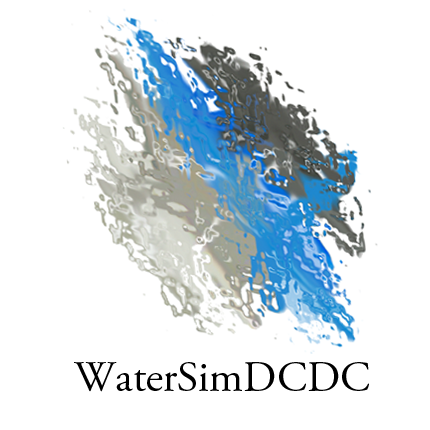
<style>
.page{position:relative;width:430px;height:430px;background:#ffffff}
.page>*{position:absolute;margin:0}
.t1{font:43px "AGaramondPro-Regular";color:#000000}
</style>
<div class="page">
<p class="t1" style="left:74px;top:362px;width:295px;height:30px">WaterSimDCDC</p>
</div>
